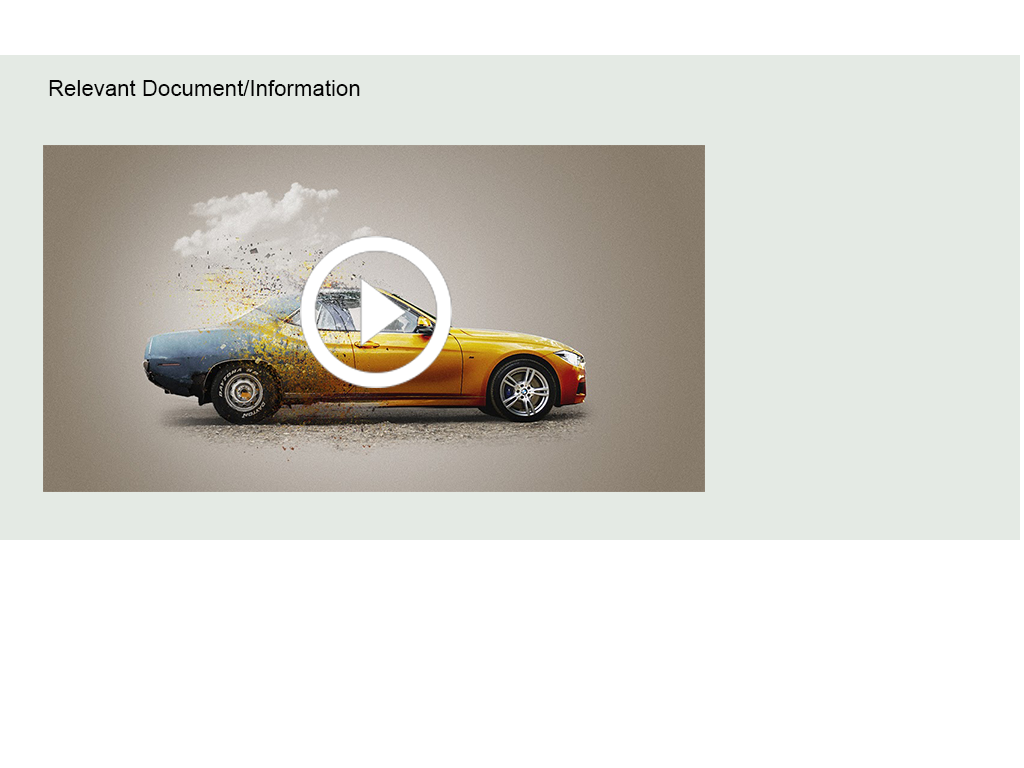
<style>
.page{position:relative;width:1024px;height:768px;background:#ffffff}
.page>*{position:absolute;margin:0}
.t1{font:22.2px "ArialMT";color:#050505}
</style>
<div class="page">
<p class="t1" style="left:49px;top:80px;width:311px;height:16px">Relevant Document/Information</p>
</div>
